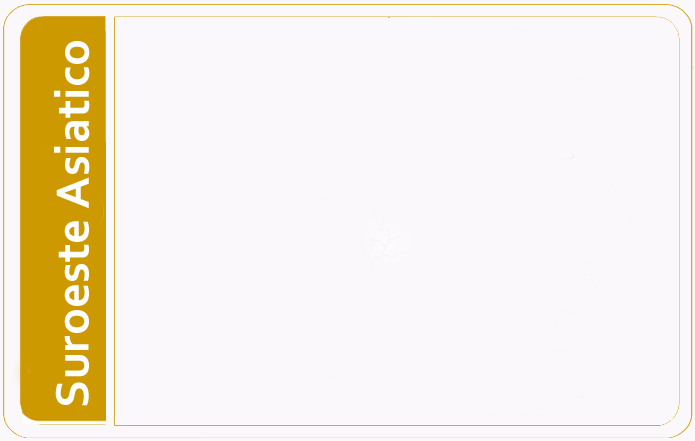
<style>
.page{position:relative;width:695px;height:441px;background:#fbf8fb}
.page>*{position:absolute;margin:0}
.t1{font:49px "Corbel-Bold";color:#ffffff}
</style>
<div class="page">
<p class="t1" style="left:54px;top:41px;width:36px;height:365px;rotate:-90deg">Suroeste Asiatico</p>
</div>
